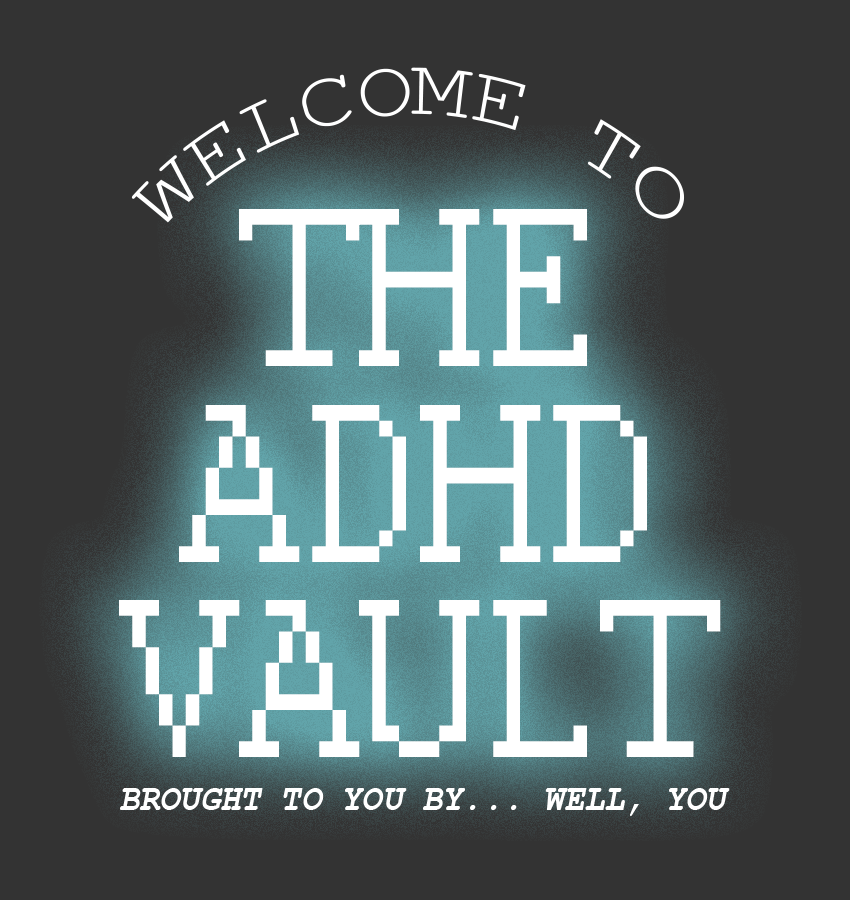
<style>
.page{position:relative;width:850px;height:900px;background:#333333}
.page>*{position:absolute;margin:0}
.t1{font:19.1px "CourierNewPSMT";color:#ffffff;scale:0.91 1}
.t2{font:60.3px "Courier";color:#ffffff;scale:0.85 1}
.t3{font:39px "CourierNewPS-BoldItalicMT";color:#ffffff;scale:0.86 1}
</style>
<div class="page">
<p class="t1" style="left:131px;top:67px;width:554px;height:156px">WELCOME TO</p>
<p class="t2" style="left:119px;top:209px;width:602px;height:548px;text-align:center">THE<br>ADHD<br>VAULT</p>
<p class="t3" style="left:120px;top:788px;width:610px;height:28px">BROUGHT TO YOU BY... WELL, YOU</p>
</div>
